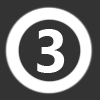
<style>
.page{position:relative;width:100px;height:100px;background:#333333}
.page>*{position:absolute;margin:0}
.t1{font:60px "SegoeUI-Bold";letter-spacing:-0.105em;color:#ffffff}
</style>
<div class="page">
<p class="t1" style="left:37px;top:29px;width:28px;height:44px">3</p>
</div>
